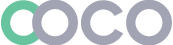
<style>
.page{position:relative;width:173px;height:45px;background:#ffffff}
.page>*{position:absolute;margin:0}
.t1{font:61.9px "COUTURE-Bold";color:#a3a4b3}
.t2{font:61.9px "COUTURE-Bold";letter-spacing:-0.22em;color:#68c39f}
</style>
<div class="page">
<p class="t1" style="left:1px;top:0px;width:171px;height:46px"><span class="t2">C</span>OCO</p>
</div>
